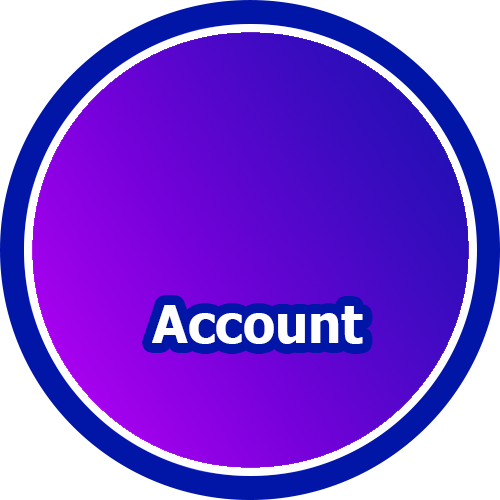
<style>
.page{position:relative;width:500px;height:500px;background:#ffffff}
.page>*{position:absolute;margin:0}
.t1{font:52px "Tahoma-Bold";color:#ffffff}
</style>
<div class="page">
<p class="t1" style="left:152px;top:305px;width:211px;height:39px">Account</p>
</div>
